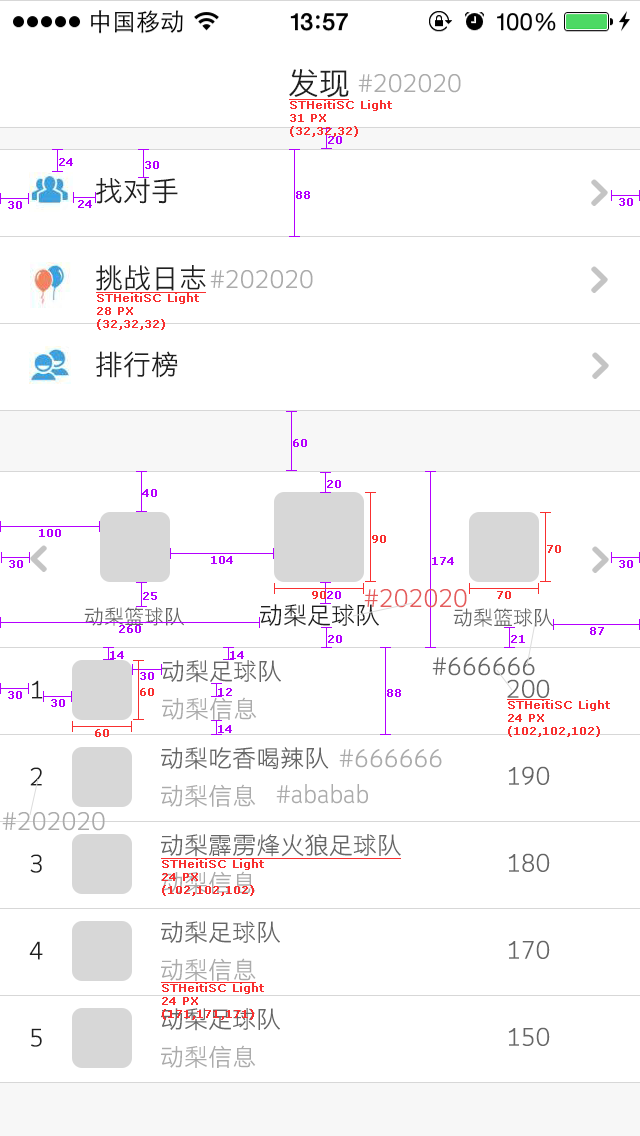
<style>
.page{position:relative;width:640px;height:1136px;background:#ffffff}
.page>*{position:absolute;margin:0}
.t1{font:31px "STHeitiSC-Light";color:#202020}
.t2{font:24px "STHeitiSC-Light";color:#ababab}
.t3{font:11px "Verdana";color:#f83030;font-weight:bold}
.t4{font:11px "Verdana";color:#b400ff;font-weight:bold}
.t5{font:28px "STHeitiSC-Light";color:#202020}
.t6{font:24px "STHeitiSC-Light";color:#e55c5c}
.t7{font:24px "STHeitiSC-Light";color:#202020}
.t8{font:20px "STHeitiSC-Light";color:#666666}
.t9{font:24px "STHeitiSC-Light";color:#666666}
</style>
<div class="page">
<p class="t1" style="left:289px;top:69px;width:60px;height:29px">发现</p>
<p class="t2" style="left:358px;top:74px;width:103px;height:19px">#202020</p>
<p class="t3" style="left:290px;top:100px;width:102px;height:37px">STHeitiSC Light<br>31 PX<br>(32,32,32)</p>
<p class="t4" style="left:328px;top:136px;width:14px;height:8px">20</p>
<p class="t4" style="left:59px;top:158px;width:14px;height:8px">24</p>
<p class="t4" style="left:145px;top:161px;width:14px;height:8px">30</p>
<p class="t5" style="left:96px;top:178px;width:82px;height:26px">找对手</p>
<p class="t4" style="left:296px;top:191px;width:14px;height:8px">88</p>
<p class="t4" style="left:619px;top:198px;width:14px;height:8px">30</p>
<p class="t4" style="left:8px;top:201px;width:14px;height:8px">30</p>
<p class="t4" style="left:78px;top:200px;width:14px;height:8px">24</p>
<p class="t5" style="left:96px;top:265px;width:110px;height:26px">挑战日志</p>
<p class="t2" style="left:210px;top:270px;width:103px;height:19px">#202020</p>
<p class="t3" style="left:97px;top:293px;width:102px;height:37px">STHeitiSC Light<br>28 PX<br>(32,32,32)</p>
<p class="t5" style="left:96px;top:351px;width:82px;height:27px">排行榜</p>
<p class="t4" style="left:293px;top:439px;width:14px;height:8px">60</p>
<p class="t4" style="left:327px;top:480px;width:14px;height:8px">20</p>
<p class="t4" style="left:142px;top:489px;width:15px;height:8px">40</p>
<p class="t4" style="left:39px;top:529px;width:22px;height:8px">100</p>
<p class="t3" style="left:372px;top:535px;width:14px;height:8px">90</p>
<p class="t3" style="left:547px;top:545px;width:14px;height:8px">70</p>
<p class="t4" style="left:211px;top:556px;width:22px;height:8px">104</p>
<p class="t4" style="left:432px;top:557px;width:22px;height:8px">174</p>
<p class="t4" style="left:9px;top:560px;width:14px;height:8px">30</p>
<p class="t4" style="left:619px;top:560px;width:14px;height:8px">30</p>
<p class="t4" style="left:143px;top:592px;width:14px;height:8px">25</p>
<p class="t3" style="left:312px;top:591px;width:14px;height:8px">90</p>
<p class="t4" style="left:327px;top:591px;width:14px;height:8px">20</p>
<p class="t6" style="left:364px;top:589px;width:103px;height:19px">#202020</p>
<p class="t3" style="left:497px;top:591px;width:14px;height:8px">70</p>
<p class="t7" style="left:260px;top:604px;width:119px;height:23px">动梨足球队</p>
<p class="t8" style="left:84px;top:607px;width:100px;height:19px">动梨篮球队</p>
<p class="t8" style="left:453px;top:608px;width:100px;height:19px">动梨篮球队</p>
<p class="t4" style="left:119px;top:625px;width:22px;height:8px">260</p>
<p class="t4" style="left:590px;top:627px;width:14px;height:8px">87</p>
<p class="t4" style="left:328px;top:635px;width:14px;height:8px">20</p>
<p class="t4" style="left:511px;top:635px;width:14px;height:8px">21</p>
<p class="t4" style="left:110px;top:651px;width:14px;height:8px">14</p>
<p class="t4" style="left:230px;top:651px;width:14px;height:8px">14</p>
<p class="t9" style="left:162px;top:660px;width:119px;height:23px">动梨足球队</p>
<p class="t9" style="left:432px;top:657px;width:103px;height:19px">#666666</p>
<p class="t4" style="left:140px;top:672px;width:14px;height:8px">30</p>
<p class="t7" style="left:32px;top:680px;width:11px;height:19px">1</p>
<p class="t3" style="left:140px;top:688px;width:14px;height:8px">60</p>
<p class="t4" style="left:218px;top:688px;width:14px;height:8px">12</p>
<p class="t4" style="left:387px;top:689px;width:14px;height:8px">88</p>
<p class="t9" style="left:507px;top:679px;width:43px;height:19px">200</p>
<p class="t4" style="left:8px;top:691px;width:14px;height:8px">30</p>
<p class="t4" style="left:51px;top:699px;width:14px;height:8px">30</p>
<p class="t2" style="left:162px;top:697px;width:95px;height:23px">动梨信息</p>
<p class="t3" style="left:508px;top:700px;width:102px;height:37px">STHeitiSC Light<br>24 PX<br>(102,102,102)</p>
<p class="t4" style="left:218px;top:725px;width:14px;height:8px">14</p>
<p class="t3" style="left:95px;top:729px;width:14px;height:8px">60</p>
<p class="t9" style="left:161px;top:747px;width:168px;height:23px">动梨吃香喝辣队</p>
<p class="t2" style="left:339px;top:749px;width:103px;height:19px">#666666</p>
<p class="t7" style="left:30px;top:767px;width:12px;height:19px">2</p>
<p class="t9" style="left:508px;top:766px;width:42px;height:19px">190</p>
<p class="t2" style="left:161px;top:784px;width:95px;height:23px">动梨信息</p>
<p class="t2" style="left:276px;top:784px;width:92px;height:20px">#ababab</p>
<p class="t2" style="left:2px;top:812px;width:103px;height:19px">#202020</p>
<p class="t9" style="left:161px;top:834px;width:240px;height:23px">动梨霹雳烽火狼足球队</p>
<p class="t7" style="left:30px;top:854px;width:12px;height:19px">3</p>
<p class="t9" style="left:508px;top:853px;width:42px;height:19px">180</p>
<p class="t3" style="left:162px;top:859px;width:102px;height:37px">STHeitiSC Light<br>24 PX<br>(102,102,102)</p>
<p class="t2" style="left:161px;top:871px;width:95px;height:23px">动梨信息</p>
<p class="t9" style="left:161px;top:921px;width:119px;height:23px">动梨足球队</p>
<p class="t7" style="left:29px;top:941px;width:14px;height:19px">4</p>
<p class="t9" style="left:508px;top:940px;width:42px;height:19px">170</p>
<p class="t2" style="left:161px;top:958px;width:95px;height:23px">动梨信息</p>
<p class="t3" style="left:162px;top:983px;width:102px;height:37px">STHeitiSC Light<br>24 PX<br>(171,171,171)</p>
<p class="t9" style="left:161px;top:1008px;width:119px;height:23px">动梨足球队</p>
<p class="t7" style="left:31px;top:1028px;width:11px;height:19px">5</p>
<p class="t9" style="left:508px;top:1027px;width:42px;height:19px">150</p>
<p class="t2" style="left:161px;top:1045px;width:95px;height:23px">动梨信息</p>
</div>
